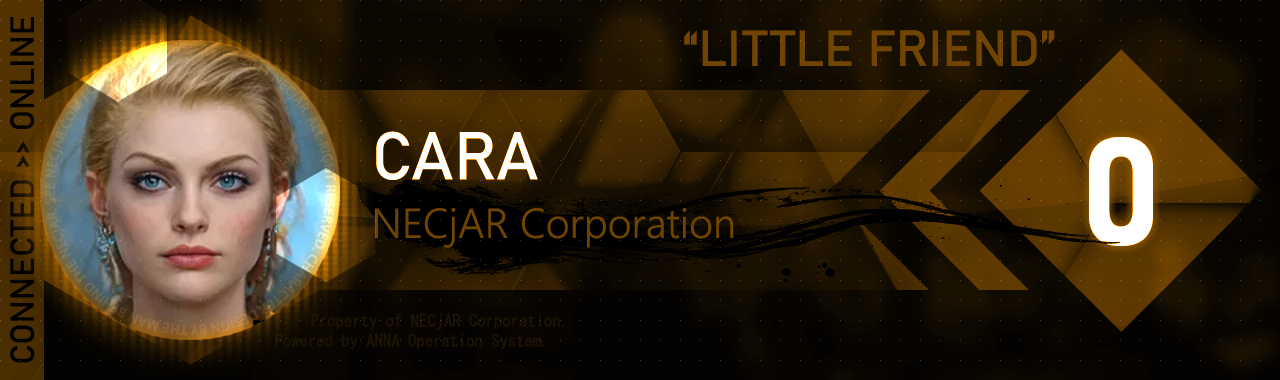
<style>
.page{position:relative;width:1280px;height:380px}
.page>*{position:absolute;margin:0}
.t1{font:33.3px "Bahnschrift";color:#000000}
.t2{font:50px "Bahnschrift";color:#714501;font-weight:bold}
.t3{font:41.7px/58.3px "LeelawadeeUI-Semilight"}
.t4{font:66.7px/58.3px "Bahnschrift";font-variant:small-caps}
.t5{font:150px "Bahnschrift-Bold";color:#ffffff}
.t6{font:16.7px "MS-Gothic";color:#1f1301}
</style>
<div class="page">
<p class="t1" style="left:10px;top:17px;width:25px;height:346px;rotate:-90deg">CONNECTED &gt;&gt; ONLINE</p>
<p class="t2" style="left:684px;top:30px;width:371px;height:36px">“LITTLE FRIEND”</p>
<p class="t3" style="left:375px;top:131px;width:359px;height:117px"><span class="t4">CARA<br></span>NECjAR Corporation</p>
<p class="t5" style="left:1089px;top:137px;width:64px;height:109px">0</p>
<p class="t6" style="left:275px;top:313px;width:289px;height:36px">Property of NECjAR Corporation.<br>Powered by ANNA Operation System.</p>
</div>
